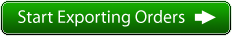
<style>
.page{position:relative;width:232px;height:36px}
.page>*{position:absolute;margin:0}
.t1{font:18px "MyriadPro-Regular";color:#ffffff}
</style>
<div class="page">
<p class="t1" style="left:18px;top:10px;width:167px;height:17px">Start Exporting Orders</p>
</div>
